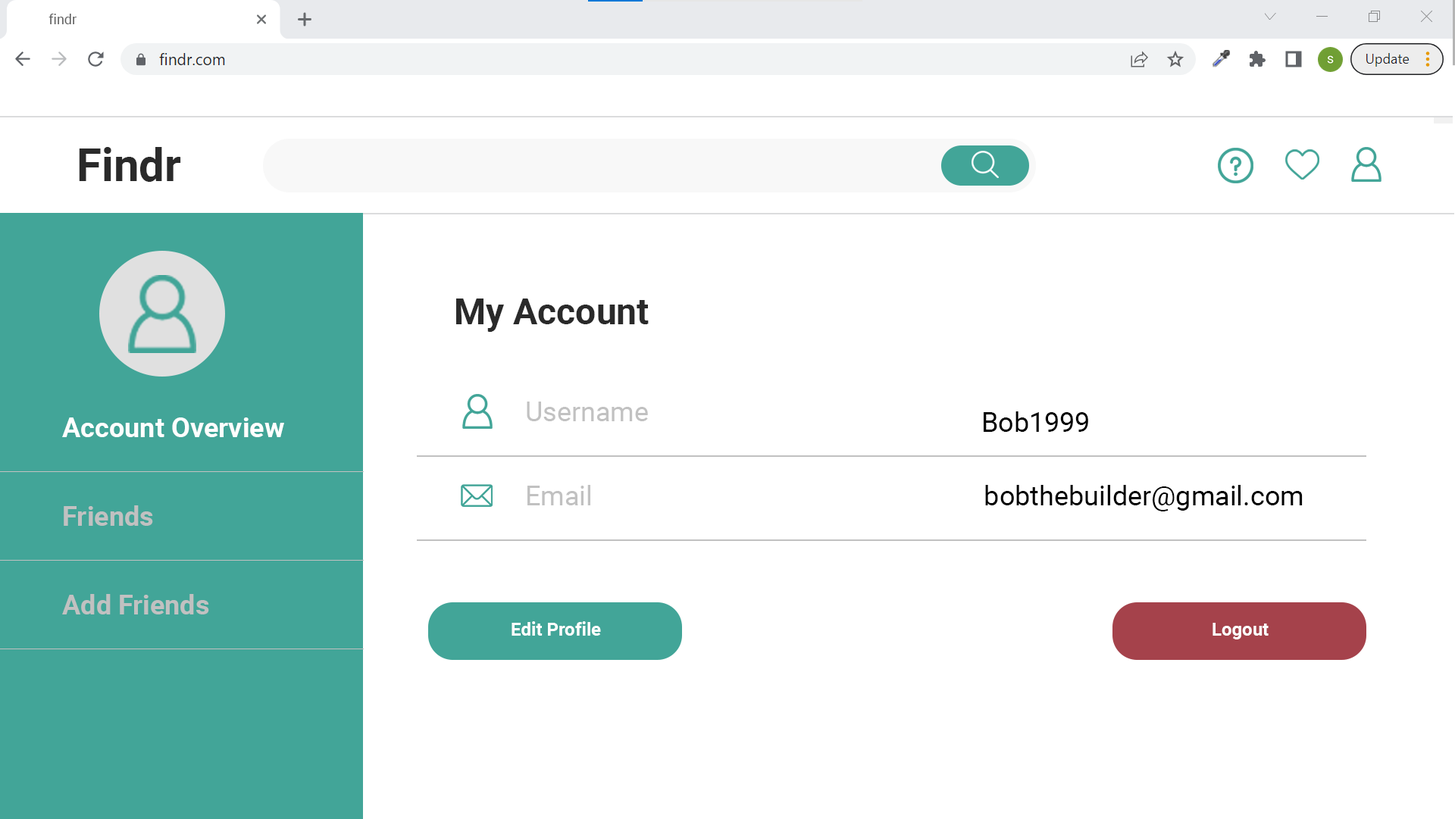
<style>
.page{position:relative;width:1455px;height:819px;background:#ffffff}
.page>*{position:absolute;margin:0}
.t1{font:13.6px "Roboto-Regular";color:#5f5f5f}
.t2{font:45.5px "Roboto-Bold";color:#2a2a2a}
.t3{font:36.4px "Roboto-Bold";color:#2a2a2a}
.t4{font:27.3px "Roboto-Regular";color:#c1c1c1}
.t5{font:27.3px "Roboto-Regular";color:#000000}
.t6{font:27.3px "Roboto-Bold";color:#ffffff}
.t7{font:27.3px "Roboto-Bold";color:#c1c1c1}
.t8{font:18.2px "Roboto-Bold";color:#ffffff}
</style>
<div class="page">
<p class="t1" style="left:49px;top:14px;width:28px;height:10px">findr</p>
<p class="t2" style="left:79px;top:147px;width:102px;height:35px">Findr</p>
<p class="t3" style="left:456px;top:299px;width:193px;height:33px">My Account</p>
<p class="t4" style="left:527px;top:402px;width:121px;height:19px">Username</p>
<p class="t5" style="left:984px;top:412px;width:104px;height:20px">Bob1999</p>
<p class="t6" style="left:62px;top:418px;width:222px;height:19px">Account Overview</p>
<p class="t4" style="left:528px;top:485px;width:62px;height:21px">Email</p>
<p class="t5" style="left:985px;top:485px;width:318px;height:27px">bobthebuilder@gmail.com</p>
<p class="t7" style="left:64px;top:506px;width:89px;height:20px">Friends</p>
<p class="t7" style="left:62px;top:594px;width:147px;height:21px">Add Friends</p>
<p class="t8" style="left:512px;top:622px;width:89px;height:14px">Edit Profile</p>
<p class="t8" style="left:1213px;top:623px;width:56px;height:17px">Logout</p>
</div>
